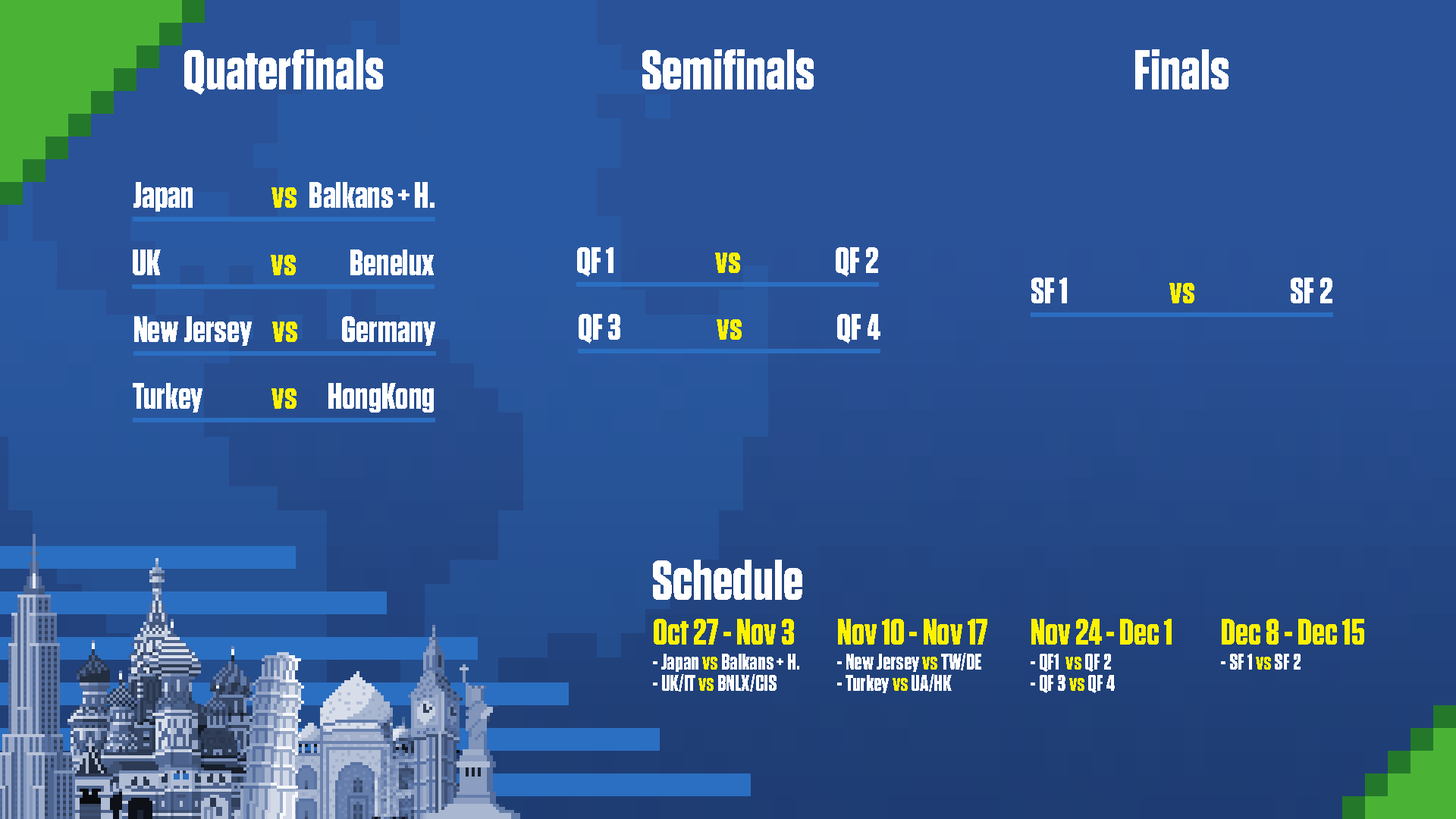
<style>
.page{position:relative;width:1456px;height:819px;background:#2a5298}
.page>*{position:absolute;margin:0}
.t1{font:56.1px "Tungsten-Bold";color:#ffffff}
.t2{font:36.4px "Tungsten-Bold";color:#ffffff}
.t3{font:36.4px "Tungsten-Bold";color:#fff200}
.t4{font:22.7px "Tungsten-Bold";color:#ffffff}
.t5{font:22.7px "Tungsten-Bold";color:#fff200}
</style>
<div class="page">
<p class="t1" style="left:184px;top:49px;width:199px;height:46px">Quaterfinals</p>
<p class="t1" style="left:642px;top:49px;width:172px;height:40px">Semifinals</p>
<p class="t1" style="left:1135px;top:49px;width:93px;height:40px">Finals</p>
<p class="t2" style="left:133px;top:182px;width:60px;height:30px">Japan</p>
<p class="t2" style="left:309px;top:182px;width:126px;height:26px">Balkans + H.</p>
<p class="t3" style="left:271px;top:187px;width:26px;height:21px">vs</p>
<p class="t2" style="left:133px;top:249px;width:28px;height:26px">UK</p>
<p class="t3" style="left:271px;top:255px;width:25px;height:20px">vs</p>
<p class="t2" style="left:350px;top:249px;width:84px;height:26px">Benelux</p>
<p class="t2" style="left:577px;top:247px;width:36px;height:30px">QF 1</p>
<p class="t3" style="left:715px;top:253px;width:25px;height:20px">vs</p>
<p class="t2" style="left:836px;top:247px;width:42px;height:30px">QF 2</p>
<p class="t2" style="left:1031px;top:278px;width:36px;height:25px">SF 1</p>
<p class="t2" style="left:1291px;top:278px;width:41px;height:25px">SF 2</p>
<p class="t3" style="left:1169px;top:283px;width:25px;height:20px">vs</p>
<p class="t2" style="left:134px;top:316px;width:118px;height:30px">New Jersey</p>
<p class="t2" style="left:342px;top:316px;width:93px;height:30px">Germany</p>
<p class="t2" style="left:579px;top:314px;width:41px;height:30px">QF 3</p>
<p class="t2" style="left:837px;top:314px;width:43px;height:30px">QF 4</p>
<p class="t3" style="left:272px;top:322px;width:25px;height:20px">vs</p>
<p class="t3" style="left:717px;top:319px;width:25px;height:21px">vs</p>
<p class="t2" style="left:133px;top:383px;width:69px;height:30px">Turkey</p>
<p class="t3" style="left:271px;top:388px;width:26px;height:21px">vs</p>
<p class="t2" style="left:328px;top:383px;width:106px;height:30px">HongKong</p>
<p class="t1" style="left:653px;top:560px;width:149px;height:40px">Schedule</p>
<p class="t3" style="left:654px;top:619px;width:140px;height:26px">Oct 27 - Nov 3</p>
<p class="t3" style="left:838px;top:619px;width:149px;height:26px">Nov 10 - Nov 17</p>
<p class="t3" style="left:1031px;top:619px;width:141px;height:26px">Nov 24 - Dec 1</p>
<p class="t3" style="left:1222px;top:619px;width:142px;height:26px">Dec 8 - Dec 15</p>
<p class="t4" style="left:653px;top:654px;width:146px;height:18px">- Japan <span class="t5">vs </span>Balkans + H.</p>
<p class="t4" style="left:837px;top:653px;width:144px;height:19px">- New Jersey <span class="t5">vs </span>TW/DE</p>
<p class="t4" style="left:1031px;top:654px;width:80px;height:18px">- QF1  <span class="t5">vs </span>QF 2</p>
<p class="t4" style="left:1221px;top:654px;width:80px;height:16px">- SF 1 <span class="t5">vs </span>SF 2</p>
<p class="t4" style="left:653px;top:674px;width:124px;height:18px">- UK/IT <span class="t5">vs </span>BNLX/CIS</p>
<p class="t4" style="left:837px;top:674px;width:115px;height:19px">- Turkey <span class="t5">vs </span>UA/HK</p>
<p class="t4" style="left:1031px;top:675px;width:84px;height:18px">- QF 3 <span class="t5">vs </span>QF 4</p>
</div>
